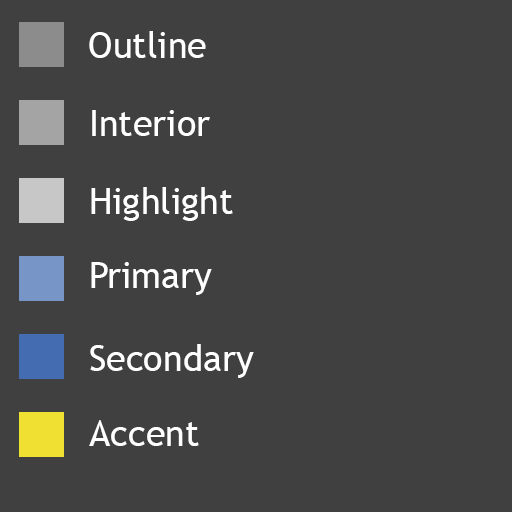
<style>
.page{position:relative;width:512px;height:512px;background:#404040}
.page>*{position:absolute;margin:0}
.t1{font:36px "TrebuchetMS";color:#ffffff}
</style>
<div class="page">
<p class="t1" style="left:89px;top:31px;width:117px;height:27px">Outline</p>
<p class="t1" style="left:92px;top:110px;width:118px;height:26px">Interior</p>
<p class="t1" style="left:91px;top:187px;width:142px;height:34px">Highlight</p>
<p class="t1" style="left:91px;top:262px;width:121px;height:33px">Primary</p>
<p class="t1" style="left:90px;top:344px;width:164px;height:34px">Secondary</p>
<p class="t1" style="left:89px;top:420px;width:110px;height:26px">Accent</p>
</div>
